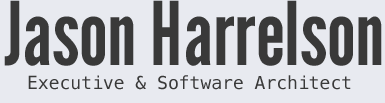
<style>
.page{position:relative;width:385px;height:103px;background:#e8eaf0}
.page>*{position:absolute;margin:0}
.t1{font:87.6px "LeagueGothic";color:#393939}
.t2{font:18px "Menlo-Regular";color:#393939}
</style>
<div class="page">
<p class="t1" style="left:4px;top:0px;width:378px;height:66px">Jason Harrelson</p>
<p class="t2" style="left:28px;top:75px;width:323px;height:15px">Executive &amp; Software Architect</p>
</div>
